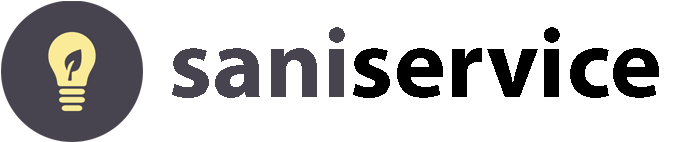
<style>
.page{position:relative;width:686px;height:142px;background:#ffffff}
.page>*{position:absolute;margin:0}
.t1{font:99.6px "MyriadHebrew-Bold";color:#000000}
.t2{font:99.6px "MyriadHebrew-Bold";color:#47444f}
</style>
<div class="page">
<p class="t1" style="left:172px;top:27px;width:487px;height:71px"><span class="t2">sani</span>service</p>
</div>
